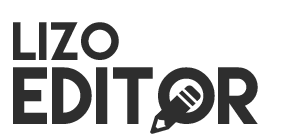
<style>
.page{position:relative;width:300px;height:134px;background:#ffffff}
.page>*{position:absolute;margin:0}
.t1{font:48px "LemonMilk";color:#2d2d2d}
.t2{font:72px "LemonMilk";color:#2e2e2e}
</style>
<div class="page">
<p class="t1" style="left:13px;top:22px;width:106px;height:38px">Lizo</p>
<p class="t2" style="left:13px;top:67px;width:245px;height:57px">Editor</p>
</div>
